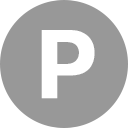
<style>
.page{position:relative;width:128px;height:128px;background:#989898}
.page>*{position:absolute;margin:0}
.t1{font:95px "AkzidenzGroteskBE-Md";color:#ffffff;font-weight:bold}
</style>
<div class="page">
<p class="t1" style="left:41px;top:30px;width:54px;height:69px">P</p>
</div>
